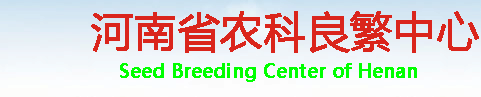
<style>
.page{position:relative;width:481px;height:97px}
.page>*{position:absolute;margin:0}
.t1{font:42px "MicrosoftYaHei";color:#da251c;font-weight:bold}
.t2{font:18px "MicrosoftYaHei";color:#00ff00;font-weight:bold}
</style>
<div class="page">
<p class="t1" style="left:91px;top:11px;width:388px;height:42px">河南省农科良繁中心</p>
<p class="t2" style="left:120px;top:63px;width:297px;height:19px">Seed Breeding Center of Henan</p>
</div>
